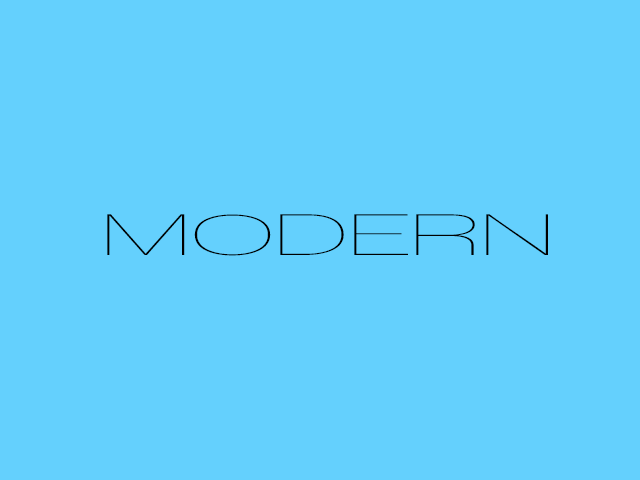
<style>
.page{position:relative;width:640px;height:480px;background:#64d0fd}
.page>*{position:absolute;margin:0}
.t1{font:60px "WalkwayUltraExpand";color:#000000}
</style>
<div class="page">
<p class="t1" style="left:107px;top:214px;width:441px;height:42px">MODERN</p>
</div>
